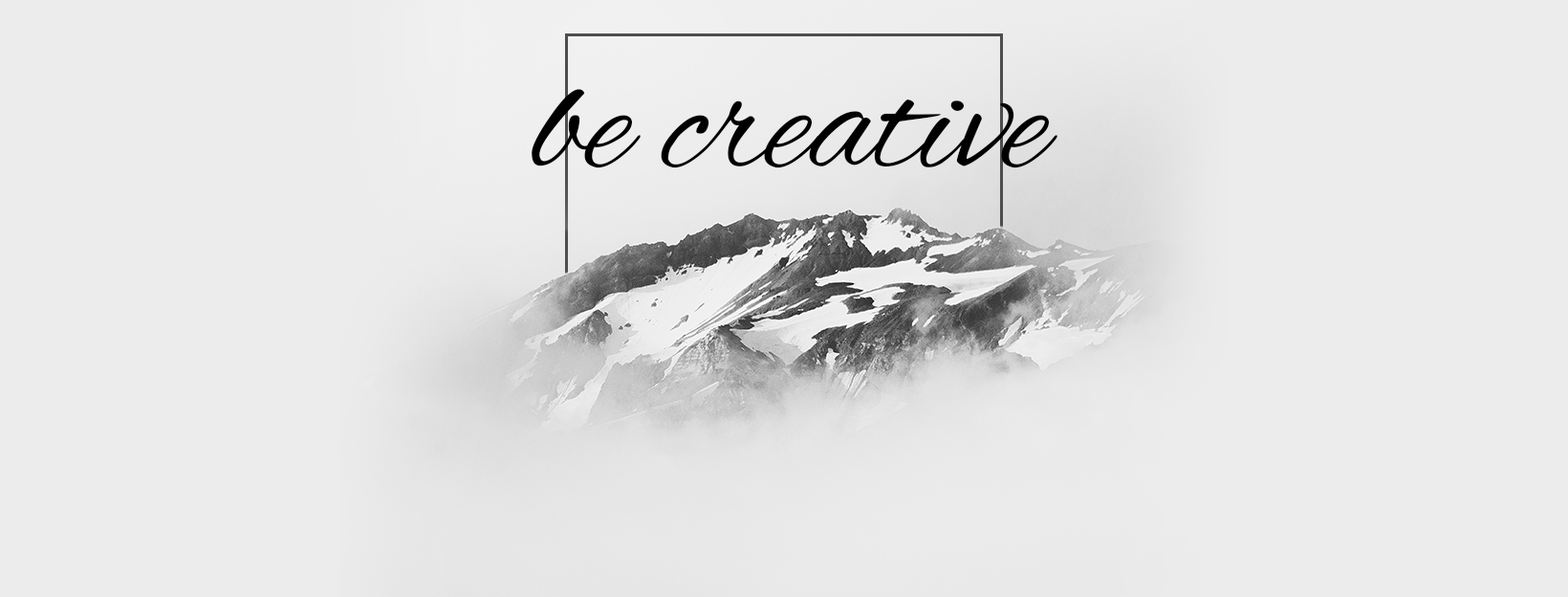
<style>
.page{position:relative;width:1568px;height:597px;background:#ececec}
.page>*{position:absolute;margin:0}
.t1{font:158.7px "AlexBrush-Regular";color:#000000}
</style>
<div class="page">
<p class="t1" style="left:532px;top:89px;width:525px;height:79px">be creative</p>
</div>
